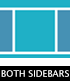
<style>
.page{position:relative;width:70px;height:81px;background:#1fb0c6}
.page>*{position:absolute;margin:0}
.t1{font:9px "LucidaSansUnicode";color:#ffffff;text-transform:uppercase}
</style>
<div class="page">
<p class="t1" style="left:1px;top:70px;width:68px;height:7px">both sidebars</p>
</div>
